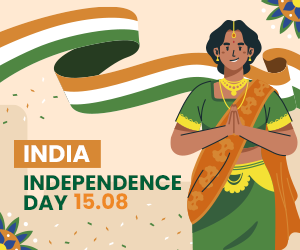
<style>
.page{position:relative;width:300px;height:250px;background:#ffe9d2}
.page>*{position:absolute;margin:0}
.t1{font:23.9px "Poppins-Bold";color:#ffffff}
.t2{font:21.1px "Poppins-Bold";color:#006038}
.t3{font:21.1px "Poppins-Bold";color:#ef8927}
</style>
<div class="page">
<p class="t1" style="left:24px;top:145px;width:66px;height:17px">INDIA</p>
<p class="t2" style="left:24px;top:175px;width:157px;height:15px">INDEPENDENCE</p>
<p class="t2" style="left:24px;top:195px;width:44px;height:15px">DAY</p>
<p class="t3" style="left:74px;top:193px;width:54px;height:17px">15.08</p>
</div>
